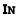
<style>
.page{position:relative;width:19px;height:19px;background:#ffffff}
.page>*{position:absolute;margin:0}
.t1{font:13.9px "Homestead-Regular";color:#000000}
.t2{font:11.1px "Homestead-Regular";color:#000000}
</style>
<div class="page">
<p class="t1" style="left:2px;top:4px;width:14px;height:11px">I<span class="t2">n</span></p>
</div>
